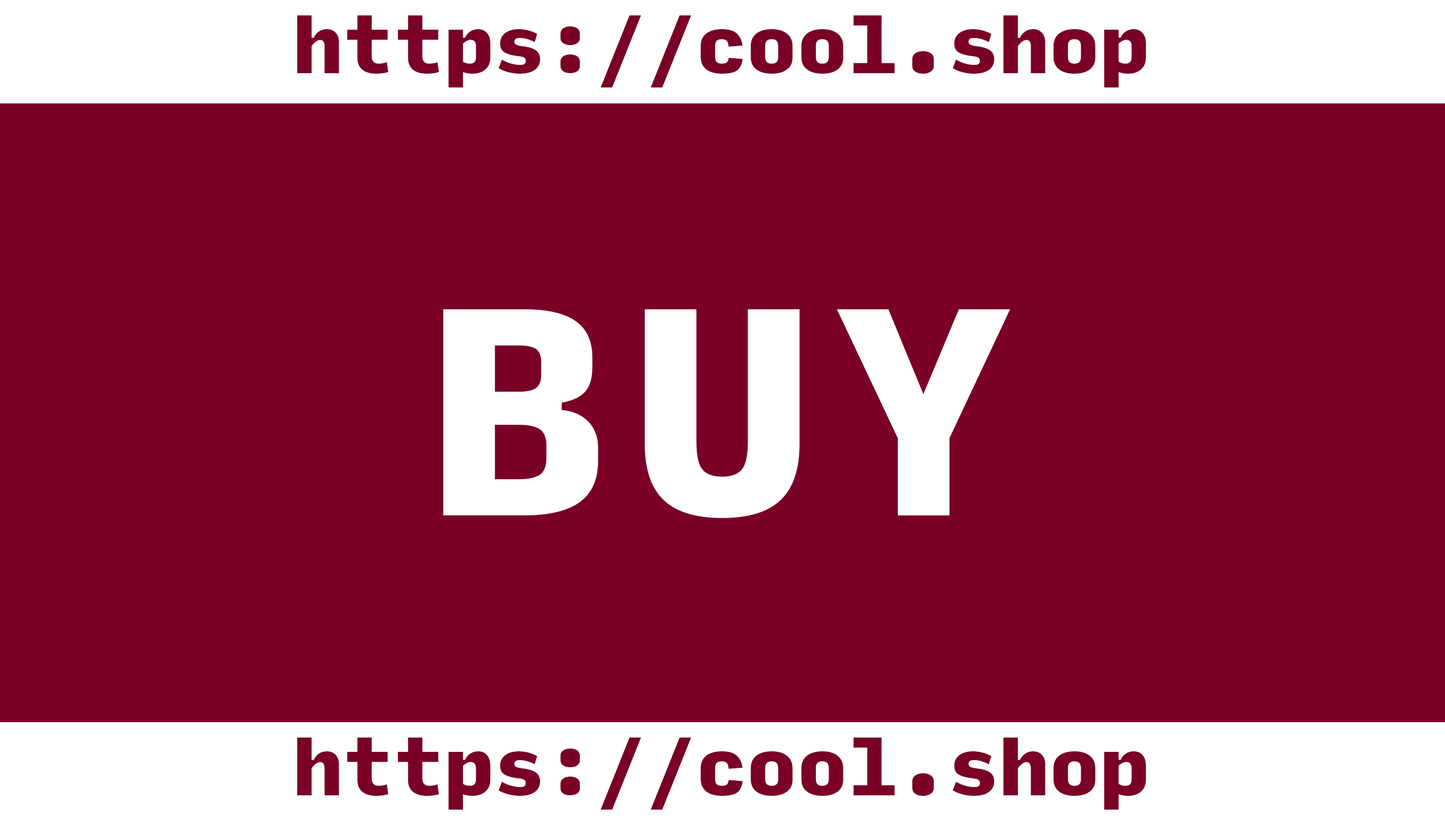
<style>
.page{position:relative;width:1445px;height:825px;background:#7a0026}
.page>*{position:absolute;margin:0}
.t1{font:79.2px "InputMono-Black";color:#7a0026}
.t2{font:283.4px "InputMono-Black";letter-spacing:0.075em;color:#ffffff}
</style>
<div class="page">
<p class="t1" style="left:297px;top:15px;width:849px;height:72px">https://cool.shop</p>
<p class="t2" style="left:443px;top:309px;width:567px;height:209px">BUY</p>
<p class="t1" style="left:297px;top:738px;width:849px;height:72px">https://cool.shop</p>
</div>
